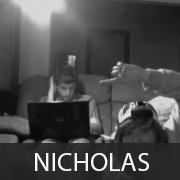
<style>
.page{position:relative;width:180px;height:180px}
.page>*{position:absolute;margin:0}
.t1{font:26.7px "MyriadPro-Regular";color:#faf7f7}
</style>
<div class="page">
<p class="t1" style="left:35px;top:153px;width:114px;height:18px">NICHOLAS</p>
</div>
